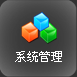
<style>
.page{position:relative;width:77px;height:77px}
.page>*{position:absolute;margin:0}
.t1{font:12px "SimSun";color:#ffffff}
</style>
<div class="page">
<p class="t1" style="left:15px;top:51px;width:47px;height:11px">系统管理</p>
</div>
